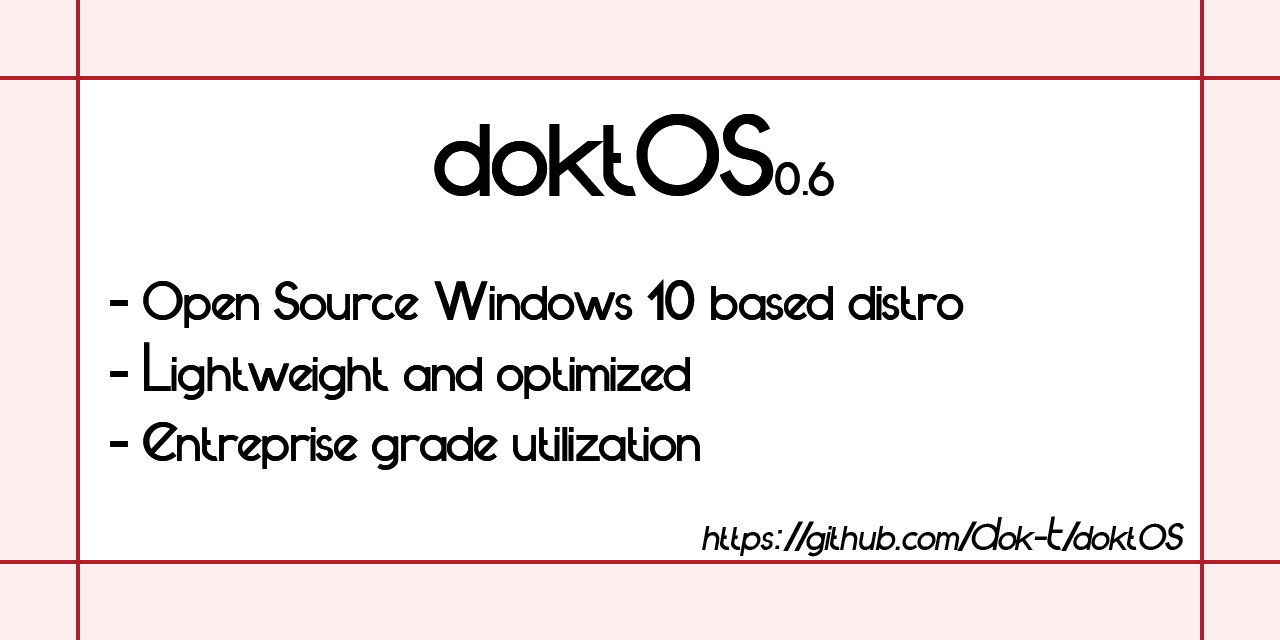
<style>
.page{position:relative;width:1280px;height:640px;background:#ffffff}
.page>*{position:absolute;margin:0}
.t1{font:124px "futuremood";color:#000000}
.t2{font:50px "futuremood";color:#000000}
.t3{font:59px "futuremood";color:#000000}
.t4{font:40px "futuremood";color:#000000;font-style:italic}
</style>
<div class="page">
<p class="t1" style="left:434px;top:114px;width:340px;height:82px">doktOS</p>
<p class="t2" style="left:775px;top:162px;width:59px;height:34px">0.6</p>
<p class="t3" style="left:110px;top:279px;width:854px;height:191px">- Open Source Windows 10 based distro<br>- Lightweight and optimized<br>- Entreprise grade utilization</p>
<p class="t4" style="left:702px;top:516px;width:482px;height:41px">https://github.com/Dok-T/doktOS</p>
</div>
